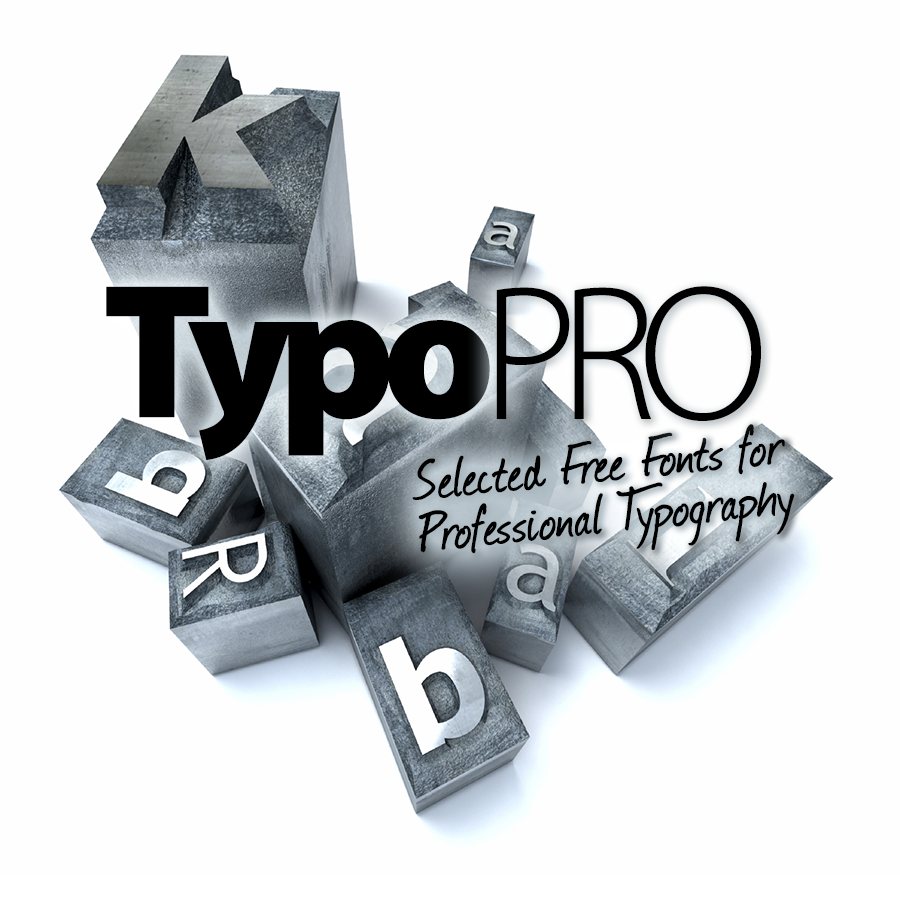
<style>
.page{position:relative;width:900px;height:900px;background:#fefefe}
.page>*{position:absolute;margin:0}
.t1{font:193.2px "MyriadPro-Black";letter-spacing:-0.075em;color:#000000}
.t2{font:193.2px "MyriadPro-Light";letter-spacing:-0.1em;color:#000000}
.t3{font:64.4px/51.5px "Journal";letter-spacing:-0.005em;color:#000000;font-weight:bold}
</style>
<div class="page">
<p class="t1" style="left:106px;top:286px;width:384px;height:174px">Typo</p>
<p class="t2" style="left:496px;top:286px;width:265px;height:135px">PRO</p>
<p class="t3" style="left:412px;top:424px;width:383px;height:130px;rotate:-6deg">Selected Free Fonts for<br>Professional Typography</p>
</div>
